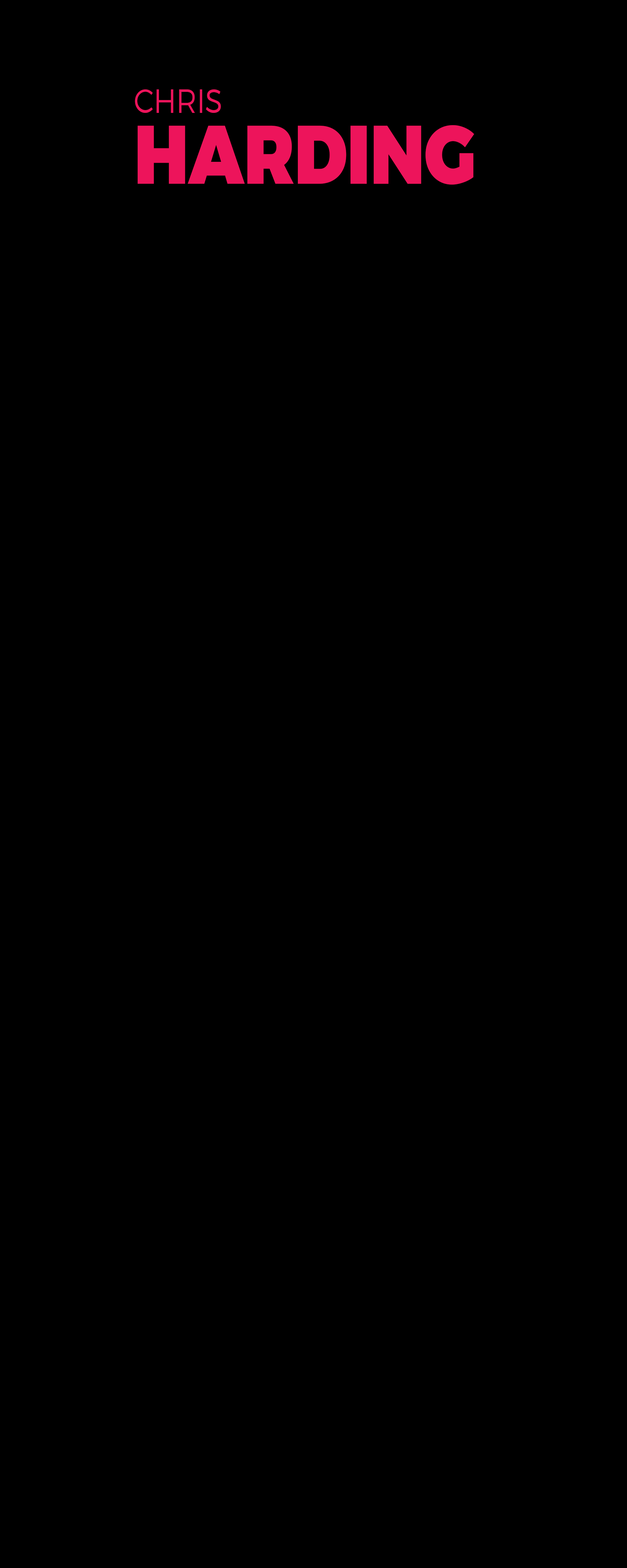
<style>
.page{position:relative;width:627px;height:1568px;background:#000000}
.page>*{position:absolute;margin:0}
.t1{font:33.9px "Montserrat-Light";color:#ed145b;text-transform:uppercase;scale:0.84 1}
.t2{font:82.8px "Montserrat-Black";color:#ed145b;text-transform:uppercase;scale:0.84 1}
</style>
<div class="page">
<p class="t1" style="left:135px;top:89px;width:86px;height:24px">chris</p>
<p class="t2" style="left:138px;top:125px;width:336px;height:60px">HArding</p>
</div>
